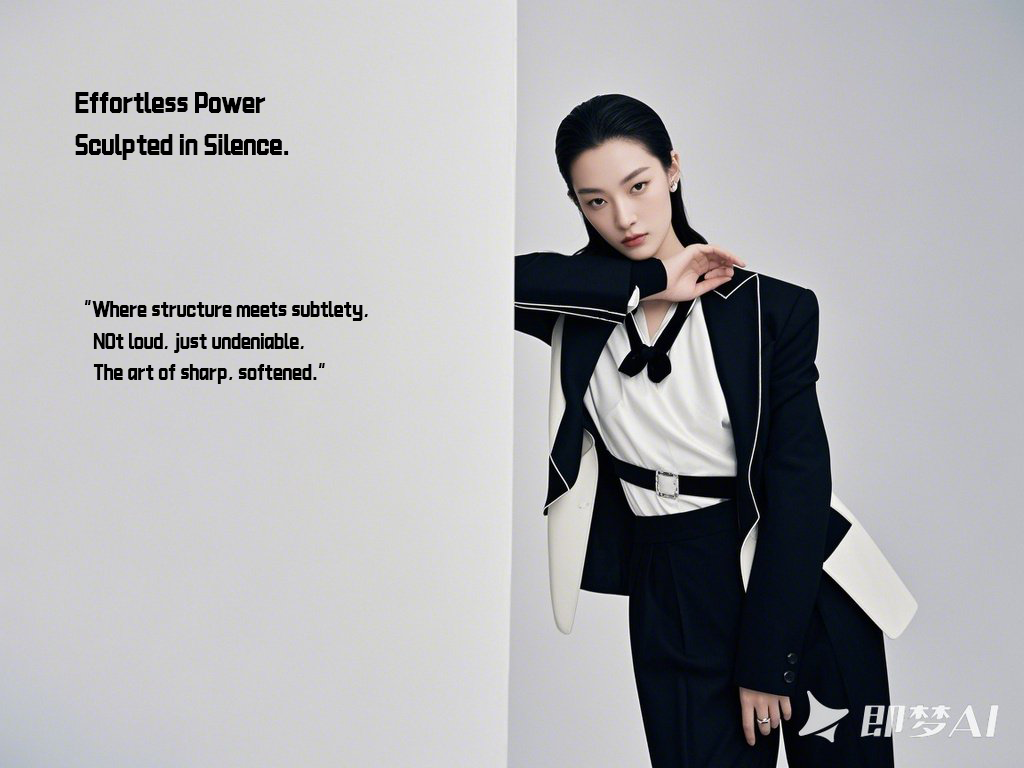
<style>
.page{position:relative;width:1024px;height:768px}
.page>*{position:absolute;margin:0}
.t1{font:18px "CKTKingKong";color:#000000}
.t2{font:24px "CKTKingKong";color:#000000}
</style>
<div class="page">
<p class="t1" style="left:75px;top:92px;width:293px;height:292px"><span class="t2">Effortless Power<br>Sculpted in Silence.<br><br><br><br></span>“Where structure meets subtlety,<br>    NOt loud, just undeniable,<br>    The art of sharp, softened.”</p>
</div>
